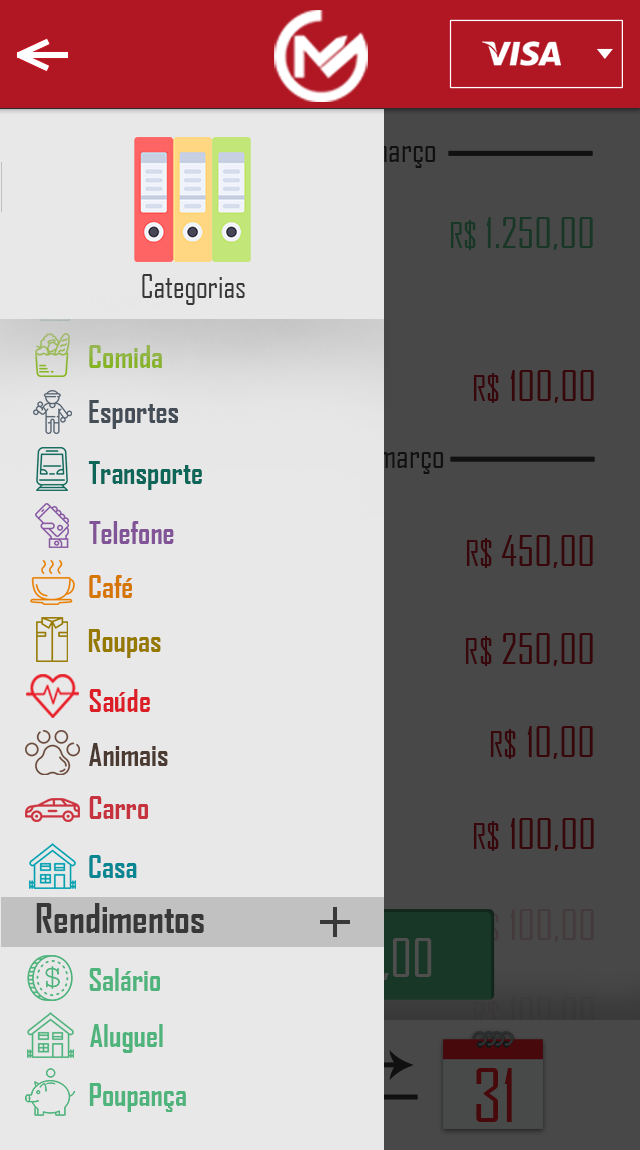
<style>
.page{position:relative;width:640px;height:1150px;background:#e8e8e8}
.page>*{position:absolute;margin:0}
.t1{font:30.8px "AgencyFB-Reg";color:#383838}
.t2{font:30px "AgencyFB-Bold"}
.t3{font:30px "AgencyFB-Bold";color:#454d56}
.t4{font:30px "AgencyFB-Bold";color:#0d6658}
.t5{font:30px "AgencyFB-Bold";color:#805397}
.t6{font:30px "AgencyFB-Bold";color:#d57606}
.t7{font:30px "AgencyFB-Bold";color:#957900}
.t8{font:30px "AgencyFB-Bold";color:#dc1e27}
.t9{font:30px "AgencyFB-Bold";color:#4a3a32}
.t10{font:30px "AgencyFB-Bold";color:#c6323e}
.t11{font:30px "AgencyFB-Bold";color:#088793}
.t12{font:38.8px "AgencyFB-Bold";color:#383838}
.t13{font:30px "AgencyFB-Bold";color:#4fb37c}
</style>
<div class="page">
<p class="t1" style="left:142px;top:274px;width:103px;height:31px">Categorias</p>
<p class="t2" style="left:89px;top:345px;width:73px;height:23px">Comida</p>
<p class="t3" style="left:89px;top:400px;width:89px;height:29px">Esportes</p>
<p class="t4" style="left:88px;top:461px;width:114px;height:29px">Transporte</p>
<p class="t5" style="left:89px;top:521px;width:85px;height:23px">Telefone</p>
<p class="t6" style="left:89px;top:575px;width:44px;height:23px">Café</p>
<p class="t7" style="left:88px;top:629px;width:73px;height:29px">Roupas</p>
<p class="t8" style="left:89px;top:689px;width:61px;height:23px">Saúde</p>
<p class="t9" style="left:89px;top:743px;width:79px;height:23px">Animais</p>
<p class="t10" style="left:89px;top:796px;width:59px;height:23px">Carro</p>
<p class="t11" style="left:89px;top:855px;width:48px;height:23px">Casa</p>
<p class="t12" style="left:36px;top:903px;width:168px;height:30px">Rendimentos</p>
<p class="t13" style="left:89px;top:968px;width:71px;height:23px">Salário</p>
<p class="t13" style="left:90px;top:1024px;width:73px;height:29px">Aluguel</p>
<p class="t13" style="left:89px;top:1083px;width:97px;height:29px">Poupança</p>
</div>
